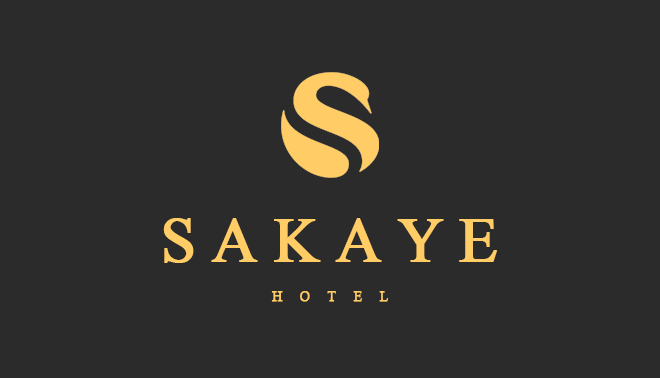
<style>
.page{position:relative;width:660px;height:378px;background:#2b2b2b}
.page>*{position:absolute;margin:0}
.t1{font:62.5px "TimesNewRomanPSMT";letter-spacing:0.24em;color:#ffcc66;font-variant:small-caps;font-weight:bold}
.t2{font:12.5px "CalistoMT";letter-spacing:1.4em;color:#ffcc66;font-variant:small-caps;font-weight:bold}
</style>
<div class="page">
<p class="t1" style="left:163px;top:218px;width:334px;height:45px">SAKAYE</p>
<p class="t2" style="left:271px;top:291px;width:118px;height:11px">HOTEL</p>
</div>
